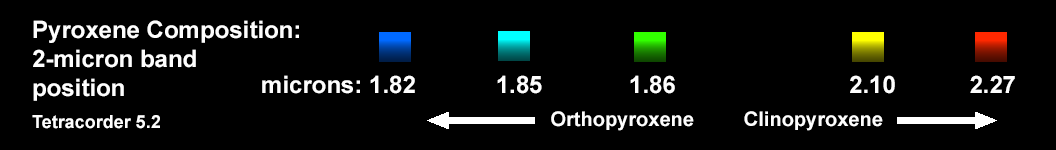
<style>
.page{position:relative;width:1056px;height:150px;background:#000000}
.page>*{position:absolute;margin:0}
.t1{font:24px "Arial-BoldMT";color:#fefefe}
.t2{font:18px "Arial-BoldMT";color:#fefefe}
.t3{font:20px "Arial-BoldMT";color:#fefefe}
</style>
<div class="page">
<p class="t1" style="left:32px;top:20px;width:267px;height:109px">Pyroxene Composition:<br>2-micron band<br>position<br><br><span class="t2">Tetracorder 5.2</span></p>
<p class="t1" style="left:262px;top:75px;width:753px;height:19px">microns: 1.82            1.85             1.86                          2.10           2.27</p>
<p class="t3" style="left:551px;top:111px;width:332px;height:20px">Orthopyroxene         Clinopyroxene</p>
</div>
